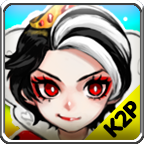
<style>
.page{position:relative;width:144px;height:144px}
.page>*{position:absolute;margin:0}
.t1{font:25px "Insaniburger";color:#000000}
</style>
<div class="page">
<p class="t1" style="left:103px;top:101px;width:34px;height:37px;rotate:-45deg">K2P</p>
</div>
